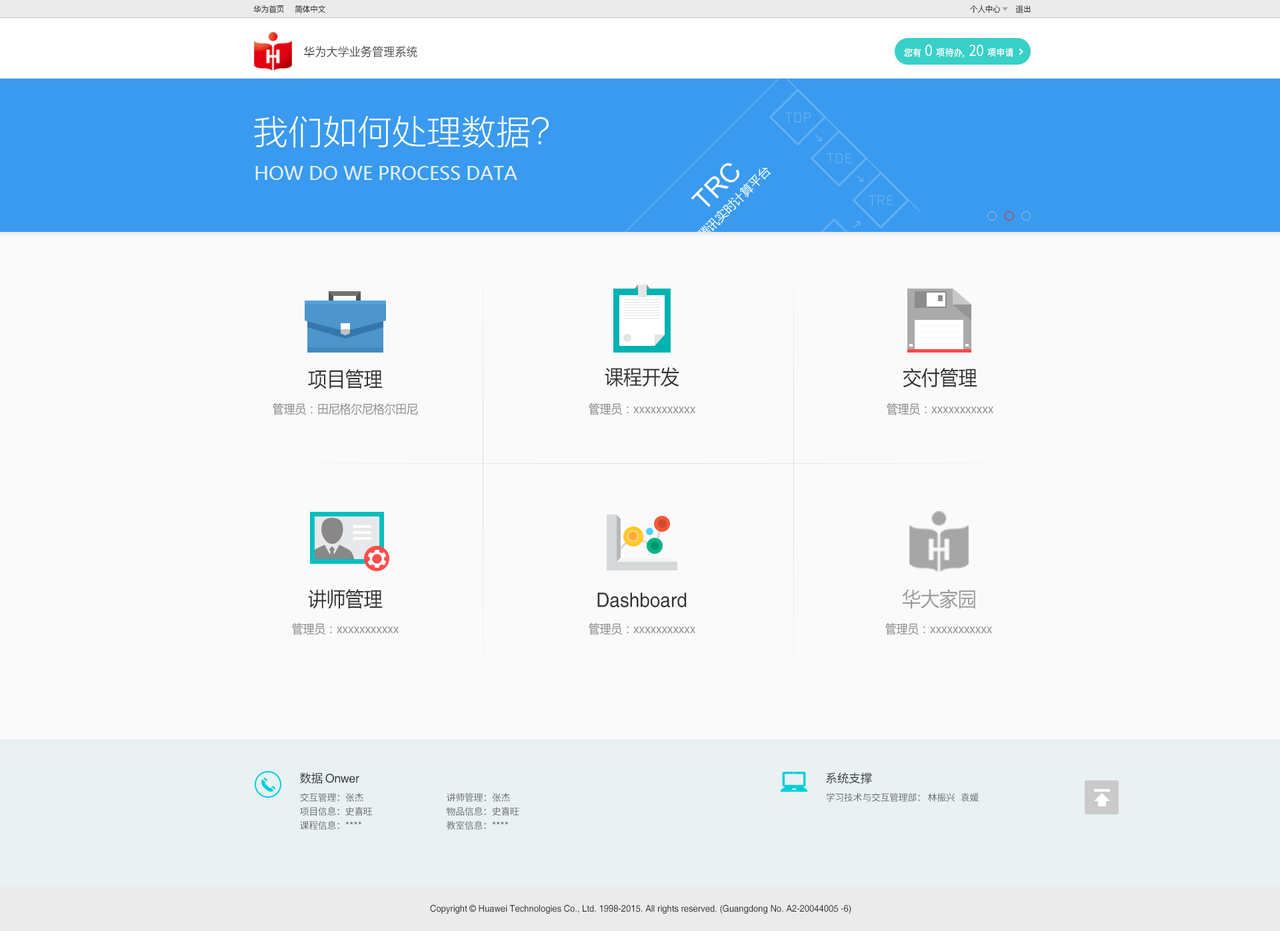
<style>
.page{position:relative;width:1280px;height:931px;background:#fafafa}
.page>*{position:absolute;margin:0}
.t1{font:8px "MicrosoftYaHei";letter-spacing:0.025em;color:#333333;scale:0.93 1}
.t2{font:12px "FZLTXHK";letter-spacing:0.025em;color:#333333;scale:0.93 1}
.t3{font:9.3px "SourceHanSansCN-Regular";color:#ffffff;scale:0.93 1}
.t4{font:14.7px "SourceHanSansCN-Regular";color:#ffffff;scale:0.93 1}
.t5{font:20px "MicrosoftYaHei";color:#333333;scale:0.93 1}
.t6{font:12px "MicrosoftYaHei";color:#8a8a8a;scale:0.93 1}
.t7{font:20px "Helvetica";color:#333333;scale:0.93 1}
.t8{font:20px "MicrosoftYaHei";color:#9c9c9c;scale:0.93 1}
.t9{font:12px "Helvetica";letter-spacing:-0.025em;color:#333333}
.t10{font:12px "SourceHanSansCN-Regular";letter-spacing:-0.025em;color:#333333}
.t11{font:9.3px "SourceHanSansCN-Regular";letter-spacing:-0.025em;color:#666666}
.t12{font:9.3px "Helvetica";color:#333333;scale:0.93 1}
</style>
<div class="page">
<p class="t1" style="left:253px;top:5px;width:31px;height:8px">华为首页</p>
<p class="t1" style="left:295px;top:5px;width:30px;height:8px">简体中文</p>
<p class="t1" style="left:970px;top:5px;width:31px;height:8px">个人中心</p>
<p class="t1" style="left:1015px;top:5px;width:16px;height:8px">退出</p>
<p class="t2" style="left:304px;top:46px;width:113px;height:11px">华为大学业务管理系统</p>
<p class="t3" style="left:904px;top:45px;width:109px;height:13px">您有 <span class="t4">0 </span>项待办,  <span class="t4">20 </span>项申请</p>
<p class="t5" style="left:308px;top:369px;width:75px;height:20px">项目管理</p>
<p class="t5" style="left:605px;top:367px;width:74px;height:20px">课程开发</p>
<p class="t5" style="left:903px;top:368px;width:74px;height:20px">交付管理</p>
<p class="t6" style="left:273px;top:403px;width:145px;height:12px">管理员：田尼格尔尼格尔田尼</p>
<p class="t6" style="left:589px;top:403px;width:106px;height:12px">管理员：xxxxxxxxxxx</p>
<p class="t6" style="left:887px;top:403px;width:106px;height:12px">管理员：xxxxxxxxxxx</p>
<p class="t5" style="left:308px;top:589px;width:75px;height:20px">讲师管理</p>
<p class="t7" style="left:597px;top:593px;width:90px;height:15px">Dashboard</p>
<p class="t8" style="left:902px;top:589px;width:73px;height:20px">华大家园</p>
<p class="t6" style="left:292px;top:623px;width:107px;height:12px">管理员：xxxxxxxxxxx</p>
<p class="t6" style="left:589px;top:623px;width:106px;height:12px">管理员：xxxxxxxxxxx</p>
<p class="t6" style="left:885px;top:623px;width:107px;height:12px">管理员：xxxxxxxxxxx</p>
<p class="t9" style="left:299px;top:773px;width:60px;height:11px"><span class="t10">数据 </span>Onwer</p>
<p class="t10" style="left:826px;top:773px;width:46px;height:11px">系统支撑</p>
<p class="t11" style="left:300px;top:793px;width:63px;height:9px">交互管理：张杰</p>
<p class="t11" style="left:447px;top:793px;width:63px;height:9px">讲师管理：张杰</p>
<p class="t11" style="left:826px;top:793px;width:153px;height:9px">学习技术与交互管理部： 林振兴   袁媛</p>
<p class="t11" style="left:300px;top:807px;width:73px;height:9px">项目信息：史喜旺</p>
<p class="t11" style="left:446px;top:807px;width:73px;height:9px">物品信息：史喜旺</p>
<p class="t11" style="left:300px;top:821px;width:61px;height:9px">课程信息：****</p>
<p class="t11" style="left:447px;top:821px;width:61px;height:9px">教室信息：****</p>
<p class="t12" style="left:430px;top:905px;width:421px;height:9px">Copyright © Huawei Technologies Co., Ltd. 1998-2015. All rights reserved. (Guangdong No. A2-20044005 -6)</p>
</div>
